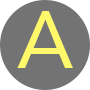
<style>
.page{position:relative;width:90px;height:90px;background:#737373}
.page>*{position:absolute;margin:0}
.t1{font:80px "Avenir-Roman";color:#fff86a}
</style>
<div class="page">
<p class="t1" style="left:17px;top:11px;width:56px;height:57px">A</p>
</div>
